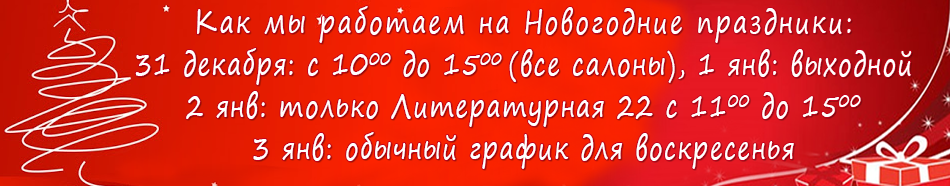
<style>
.page{position:relative;width:950px;height:186px}
.page>*{position:absolute;margin:0}
.t1{font:31.2px/42px "SegoePrint";letter-spacing:0.06em;color:#ffffff;scale:0.77 1}
.t2{font:31.2px/42px "SegoePrint";letter-spacing:0.1em;color:#ffffff;scale:0.77 1}
</style>
<div class="page">
<p class="t1" style="left:135px;top:6px;width:777px;height:163px;text-align:center"><span class="t2">Как мы работаем на Новогодние праздники:<br></span>31 декабря: с 1000 до 1500 (все салоны), 1 янв: выходной<br>2 янв: только Литературная 22 с 1100 до 1500<br>3 янв: обычный график для воскресенья</p>
</div>
